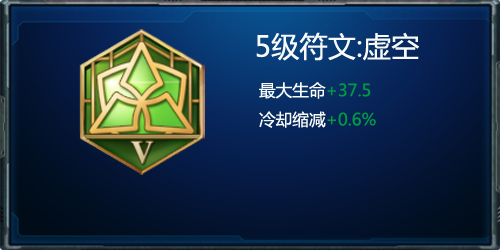
<style>
.page{position:relative;width:500px;height:250px}
.page>*{position:absolute;margin:0}
.t1{font:28.3px "MicrosoftYaHei";color:#f7faf8}
.t2{font:16.7px "MicrosoftYaHei";color:#f7faf8}
.t3{font:16.7px "MicrosoftYaHei";color:#009944}
</style>
<div class="page">
<p class="t1" style="left:256px;top:32px;width:163px;height:96px;text-align:center">5级符文:虚空<br><span class="t2">  最大生命</span><span class="t3">+37.5<br></span><span class="t2">  冷却缩减</span><span class="t3">+0.6%</span></p>
</div>
